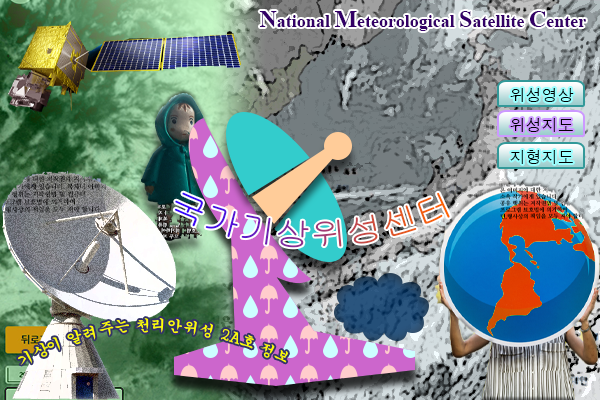
<style>
.page{position:relative;width:600px;height:400px}
.page>*{position:absolute;margin:0}
.t1{font:18px "TimesNewRomanPS-BoldMT";color:#330066}
.t2{font:24px "TimesNewRomanPS-BoldMT";color:#330066}
.t3{font:16px "Dotum";color:#000000}
.t4{font:33px "Gulim"}
.t5{font:15px "Gungsuh";color:#ffff00}
</style>
<div class="page">
<p class="t1" style="left:259px;top:11px;width:327px;height:20px"><span class="t2">N</span>ational <span class="t2">M</span>eteorological <span class="t2">S</span>atellite <span class="t2">C</span>enter</p>
<p class="t3" style="left:510px;top:88px;width:64px;height:14px">위성영상</p>
<p class="t3" style="left:510px;top:118px;width:63px;height:14px">위성지도</p>
<p class="t3" style="left:510px;top:150px;width:63px;height:14px">지형지도</p>
<p class="t4" style="left:174px;top:192px;width:276px;height:56px">국가기상위성센터</p>
<p class="t5" style="left:18px;top:318px;width:270px;height:47px">기상이 알려주는 천리안위성 2A호 정보</p>
</div>
